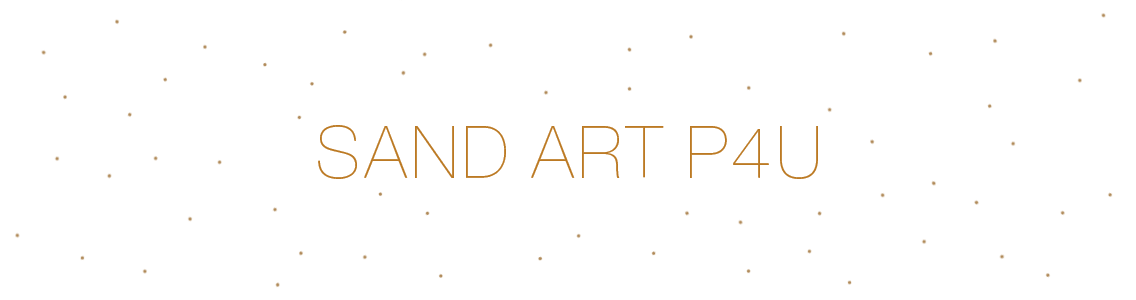
<style>
.page{position:relative;width:1136px;height:300px;background:#ffffff}
.page>*{position:absolute;margin:0}
.t1{font:72px "AppleSDGothicNeo-Thin";color:#bc7a24}
</style>
<div class="page">
<p class="t1" style="left:318px;top:125px;width:500px;height:54px">SAND ART P4U</p>
</div>
